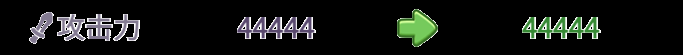
<style>
.page{position:relative;width:683px;height:55px;background:#000000}
.page>*{position:absolute;margin:0}
.t1{font:28px "WebPSD-18463539-0-Regular";color:#837a91;font-weight:bold}
.t2{font:28px "WebPSD-18463539-0-Regular";color:#59496e;font-weight:bold}
.t3{font:28px "WebPSD-18463539-0-Regular";color:#368934;font-weight:bold}
</style>
<div class="page">
<p class="t1" style="left:57px;top:10px;width:160px;height:36px">攻击力</p>
<p class="t2" style="left:237px;top:10px;width:140px;height:36px">44444</p>
<p class="t3" style="left:522px;top:10px;width:140px;height:36px">44444</p>
</div>
